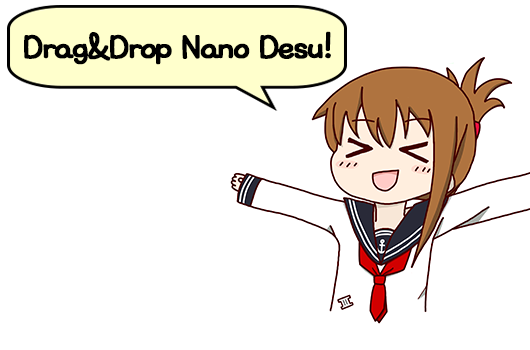
<style>
.page{position:relative;width:530px;height:350px;background:#ffffff}
.page>*{position:absolute;margin:0}
.t1{font:35px "Typo_SogonSogon_B";letter-spacing:-0.1em;color:#000000;font-weight:bold}
</style>
<div class="page">
<p class="t1" style="left:24px;top:31px;width:307px;height:34px">Drag&amp;Drop Nano Desu!</p>
</div>
